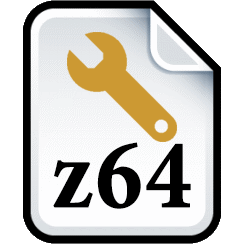
<style>
.page{position:relative;width:244px;height:244px;background:#ffffff}
.page>*{position:absolute;margin:0}
.t1{font:100px "MinionPro-BoldCn";color:#000000;font-weight:bold}
</style>
<div class="page">
<p class="t1" style="left:53px;top:142px;width:138px;height:67px">z64</p>
</div>
